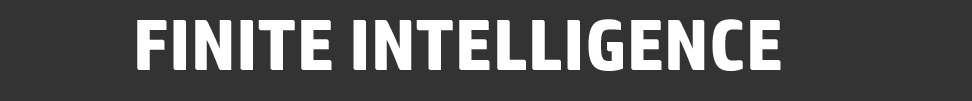
<style>
.page{position:relative;width:972px;height:101px;background:#333333}
.page>*{position:absolute;margin:0}
.t1{font:72px "HPSimplified-Bold";letter-spacing:0.005em;color:#ffffff}
</style>
<div class="page">
<p class="t1" style="left:137px;top:19px;width:644px;height:52px">FINITE INTELLIGENCE</p>
</div>
